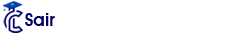
<style>
.page{position:relative;width:240px;height:34px;background:#ffffff}
.page>*{position:absolute;margin:0}
.t1{font:18px "AvantGardeITCbyBT-Demi";color:#000066}
</style>
<div class="page">
<p class="t1" style="left:25px;top:13px;width:30px;height:13px">Sair</p>
</div>
